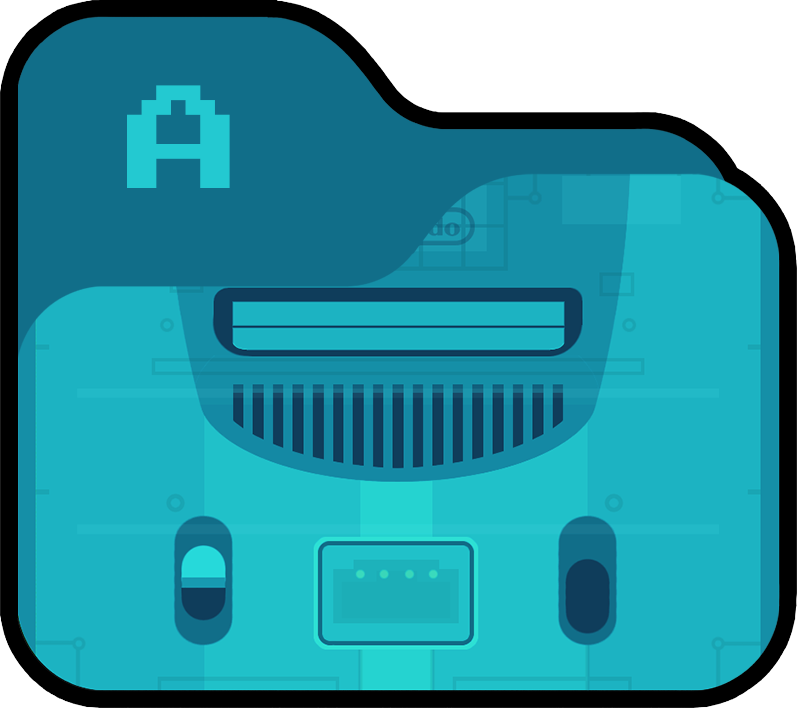
<style>
.page{position:relative;width:797px;height:708px;background:#1cb3c2}
.page>*{position:absolute;margin:0}
.t1{font:150px "PixelEmulator";color:#23c9d1}
</style>
<div class="page">
<p class="t1" style="left:127px;top:85px;width:103px;height:103px">A</p>
</div>
